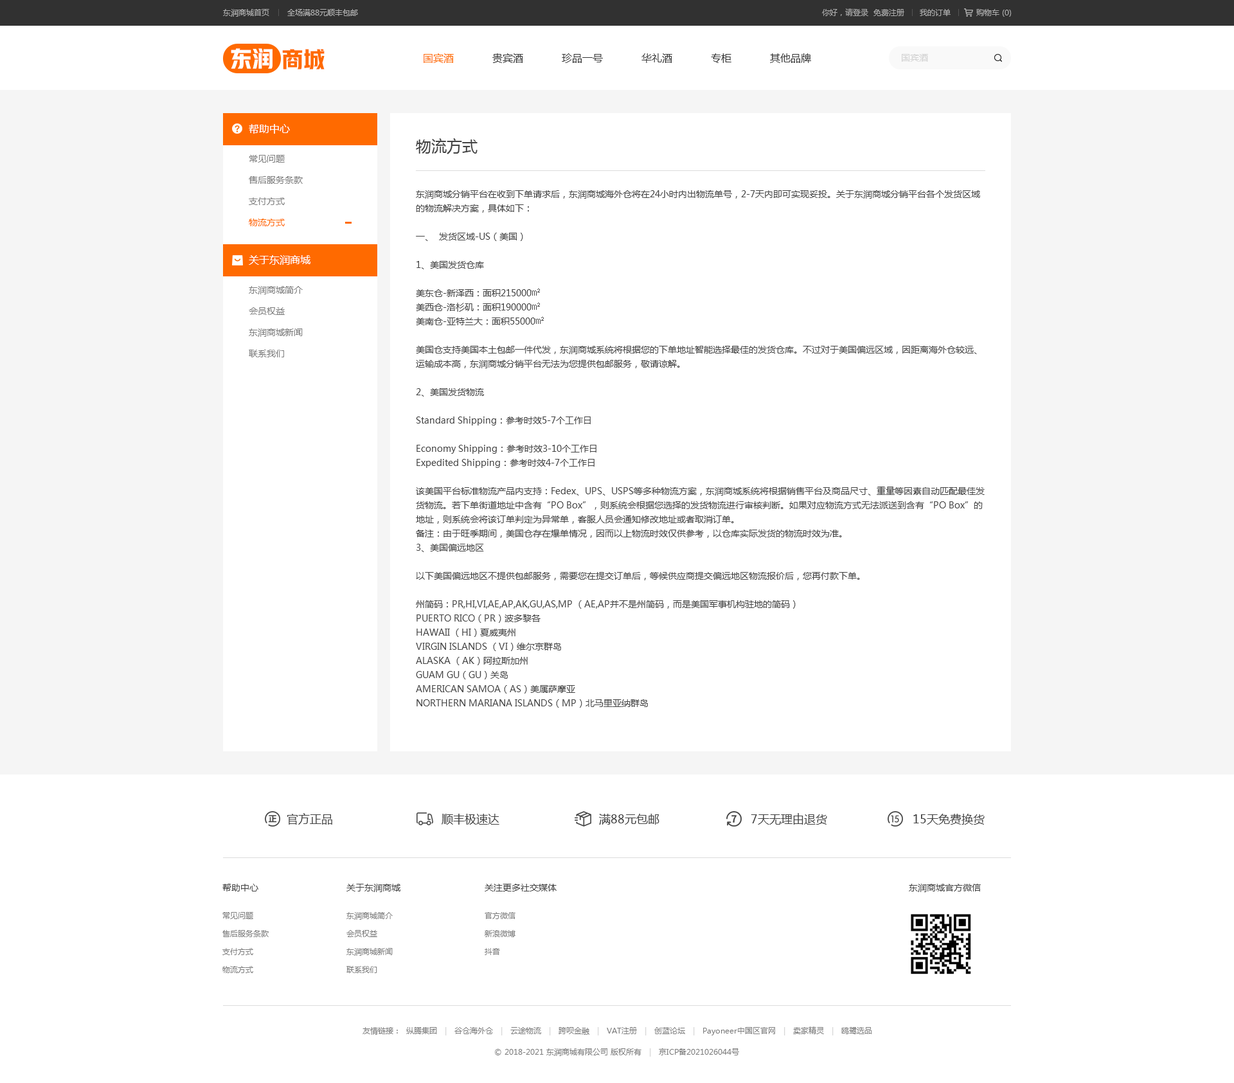
<style>
.page{position:relative;width:1234px;height:1083px;background:#ffffff}
.page>*{position:absolute;margin:0}
.t1{font:7.7px "MicrosoftYaHei";color:#b0b0b0}
.t2{font:7.7px "MicrosoftYaHei";color:#acacac}
.t3{font:21.9px "HYYakuHei-HEW";color:#ffffff}
.t4{font:21.9px "HYYakuHei-HEW";color:#ff6a00}
.t5{font:10.3px "MicrosoftYaHei";color:#333333}
.t6{font:10.3px "MicrosoftYaHei";color:#ff6a00}
.t7{font:9px "MicrosoftYaHei";color:#d2d2d2}
.t8{font:10.3px "MicrosoftYaHei";color:#ffffff}
.t9{font:15.4px "MicrosoftYaHei";color:#434343}
.t10{font:9px/21.2px "MicrosoftYaHei";color:#7d7d7d}
.t11{font:9px/21.2px "MicrosoftYaHei";color:#ff6a00}
.t12{font:9px/14.1px "MicrosoftYaHei";color:#434343}
.t13{font:9px/14.1px "SimSun";color:#434343}
.t14{font:11.6px "MicrosoftYaHei";color:#434343}
.t15{font:9px "MicrosoftYaHei";color:#434343}
.t16{font:7.7px/18px "MicrosoftYaHei";color:#7d7d7d}
.t17{font:7.7px "MicrosoftYaHei";color:#7d7d7d}
.t18{font:7.7px "MicrosoftYaHei";color:#d2d2d2}
</style>
<div class="page">
<p class="t1" style="left:223px;top:9px;width:135px;height:8px">东润商城首页       全场满88元顺丰包邮</p>
<p class="t2" style="left:822px;top:8px;width:190px;height:9px">你好，请登录  免费注册      我的订单          购物车 (0)</p>
<p class="t3" style="left:231px;top:48px;width:42px;height:21px">东润</p>
<p class="t4" style="left:282px;top:49px;width:43px;height:20px">商城</p>
<p class="t5" style="left:424px;top:53px;width:387px;height:10px"><span class="t6">国宾酒</span>            贵宾酒            珍品一号            华礼酒            专柜            其他品牌</p>
<p class="t7" style="left:902px;top:54px;width:26px;height:8px">国宾酒</p>
<p class="t8" style="left:249px;top:124px;width:41px;height:10px">帮助中心</p>
<p class="t9" style="left:416px;top:138px;width:62px;height:16px">物流方式</p>
<p class="t10" style="left:249px;top:155px;width:54px;height:71px">常见问题<br>售后服务条款<br>支付方式<br><span class="t11">物流方式</span></p>
<p class="t12" style="left:416px;top:190px;width:569px;height:518px">东润商城分销平台在收到下单请求后，东润商城海外仓将在24小时内出物流单号，2-7天内即可实现妥投。关于东润商城分销平台各个发货区域的物流解决方案，具体如下：<br> <br>一、  发货区域-US（美国）<br> <br>1、美国发货仓库<br> <br>美东仓-新泽西：面积215000<span class="t13">㎡</span><br>美西仓-洛杉矶：面积190000<span class="t13">㎡</span><br>美南仓-亚特兰大：面积55000<span class="t13">㎡</span><br> <br>美国仓支持美国本土包邮一件代发，东润商城系统将根据您的下单地址智能选择最佳的发货仓库。不过对于美国偏远区域，因距离海外仓较远、运输成本高，东润商城分销平台无法为您提供包邮服务，敬请谅解。<br> <br>2、美国发货物流<br> <br>Standard Shipping：参考时效5-7个工作日<br><br>Economy Shipping：参考时效3-10个工作日<br>Expedited Shipping：参考时效4-7个工作日<br> <br>该美国平台标准物流产品内支持：Fedex、UPS、USPS等多种物流方案，东润商城系统将根据销售平台及商品尺寸、重量等因素自动匹配最佳发货物流。若下单街道地址中含有“PO Box”，则系统会根据您选择的发货物流进行审核判断。如果对应物流方式无法派送到含有“PO Box”的地址，则系统会将该订单判定为异常单，客服人员会通知修改地址或者取消订单。<br>备注：由于旺季期间，美国仓存在爆单情况，因而以上物流时效仅供参考，以仓库实际发货的物流时效为准。<br>3、美国偏远地区<br> <br>以下美国偏远地区不提供包邮服务，需要您在提交订单后，等候供应商提交偏远地区物流报价后，您再付款下单。<br> <br>州简码：PR,HI,VI,AE,AP,AK,GU,AS,MP （AE,AP并不是州简码，而是美国军事机构驻地的简码）<br>PUERTO RICO（PR）波多黎各<br>HAWAII （HI）夏威夷州<br>VIRGIN ISLANDS （VI）维尔京群岛<br>ALASKA （AK）阿拉斯加州<br>GUAM GU（GU）关岛  <br>AMERICAN SAMOA（AS）美属萨摩亚<br>NORTHERN MARIANA ISLANDS（MP）北马里亚纳群岛<br> <br>二、发货区域-UK（英国）<br> <br>1、英国发货仓库<br> <br>英国伯明翰仓：面积100000<span class="t13">㎡</span><br>英国仓支持英国本土包邮一件代发，不过对于英国偏远区域，因距离海外仓较远、运输成本高，东润商城分销平台无法为您提供包邮服务，敬请谅解。<br> <br>2、英国发货物流<br> <br>Standard Shiping：参考时效3-5天<br> <br>该英国平台标准物流产品内支持：Yodel、Hermes、Royal Mail等多种物流方案，东润商城系统将根据销售平台及商品尺寸、重量等因素自动匹配最佳发货物流。<br> <br>3、英国偏远地区<br> <br>以下英国偏远地区不提供包邮服务，需要您在提交订单后，等候供应商提交偏远地区物流报价后，您再付款下单。<br>对于英国偏远地区，不同物流渠道定义有所不同，具体如下：<br> <br>Yodel偏远地区邮编：<br> <br>AB10-16, AB21-25，AB30-35, AB39, AB41-43, AB51-53，AB36-38, AB44-45, AB54-56；<br>BT1-9, BT10-44, BT45-49, BT51-58, BT60-61, BT62-67，BT68-82, BT92-94；<br>DD6-11；<br>EH35-40, EH42-46；<br>FK14, FK18-19，FK20，FK21；<br>HS1-9；<br>All IM；<br>IV1-3, IV4-11, IV12, IV13-28, IV30, IV31-32, IV36, IV40, IV41-49, IV51, IV52-54, IV55-56，IV63；<br>KA27-28；<br>KW1-13, KW14，KW15-17；<br>KY9-10, KY14-16；<br>PA20-33, PA34, PA35-38, PA41-48, PA49, PA60-61,PA62-72, PA73, PA74-75,PA76-78，PA80；<br>PH6-16,PH17-19,PH20-26,PH30-39, PH40-41，PH42-44，PH49, PH50；<br>PO30-41；<br>TD1-8, TD10-14；<br>TR21-25；<br>ZE1-3.<br> <br>A区为英国内陆地区，B区为偏远地区：ChannelIsland(GY1-9,GY10-99,JE1-9,JE10-99）不通邮；<br>BT1-9,BT10-99不通邮<br> <br>Hermes偏远地区邮编：<br>偏远地区包含：<br><br>Highlands&amp;Island\Channel Islands\Northern Ireland(BT)\BFPO\Isle of Man(IM)<br>以及邮编中含有以下前缀的区域：“GY”、“JE”、“ZE”、“BT”、“BF”、“IM”、“HS”、“KW”、“IV”、“AB36-38”、“AB54-56”、“FK17-21”、“PA20-80”、“PH15-50”、“KA27&amp;KA28”、“TR-25”。<br><br>三、发货区域-DE（德国）<br><br><br>1、德国发货仓库<br><br>德国迪岑巴赫仓：面积40000<span class="t13">㎡</span><br><br>德国仓支持德国本土包邮一件代发，东润商城系统将根据您的下单地址智能选择最佳的发货仓库。不过对于德国偏远区域，因距离海外仓较远、运输成本高，东润商城分销平台无法为您提供包邮服务，敬请谅解。<br><br><br><br>2、德国发货物流<br><br>Standard Shiping：参考时效1-3个工作日<br><br>德国平台标准物流产品内支持：DHL等物流方案，东润商城系统将根据销售平台及商品尺寸、重量等因素自动匹配最佳发货物流。<br><br><br>四、发货区域-FR（法国）<br><br><br>1、法国发货仓库<br><br>法国巴黎仓：面积33000<span class="t13">㎡</span><br><br>法国仓支持法国本土包邮一件代发，东润商城系统将根据您的下单地址智能选择最佳的发货仓库。不过对于法国偏远区域，因距离海外仓较远、运输成本高，东润商城分销平台无法为您提供包邮服务，敬请谅解。<br><br>2、法国发货物流<br><br>Standard Shipping：参考时效1-3个工作日<br><br>Standard International：参考时效1-7个工作日<br><br>Economy International：参考时效5-10个工作日<br><br>该法国平台标准物流产品内支持：GLS、LAPOSTE、FRC等多种物流方案，东润商城系统将根据销售平台及商品尺寸、重量等因素自动匹配最佳发货物流。<br><br>3、法国偏远地区<br><br>以下法国偏远地区不提供包邮服务，需要您在提交订单后，等待供应商提交偏远地区物流报价后，您再付款下单。<br><br>Corsica-柯西嘉<br>French Islands-法国岛屿<br>Mountainous areas-山区<br><br>五、发货区域-CZ (捷克）<br> <br>1、捷克发货仓库：捷克仓-布拉格：面积52000<span class="t13">㎡</span><br>捷克仓支持德国本土包邮一件代发，东润商城系统将根据您的下单地址智能选择最佳的发货仓库。不过对于德国偏远区域，因距离海外仓较远、运输成本高，东润商城分销平台无法为您提供包邮服务，敬请谅解。<br> <br>2、捷克发货物流：<br> Standard Shiping：参考时效1-3个工作日<br> Standard International: 参考时效3-5个工作日<br> <br> DHL-德国本地派送<br> DHL-国际派送<br> GLS-德国本地派送<br> GLS-欧洲国际包裹<br> *不接受PO.BOX地址<br><br><br>六、东润商城尾程物流方式查询网址<br>1、万能物流查询：https://www.17track.net/zh-cn<br>2、XPD: https://www.xdp.co.uk/express/ （需要输入查询跟踪单号和发货地址邮编）<br>3、Yodel: https://www.yodel.co.uk/<br>4、Royalmail: https://www3.royalmail.com/track-your-item#/<br>5、Fedex: https://www.fedex.com/en-us/home.html<br>6、DHL-德国包裹：https://www.dhl.de/en/privatkunden.html<br>7、GLS:https://www.dhl.de/en/privatkunden.html<br>8、USPS: https://www.usps.com/<br>9、UPS: https://www.ups.com/us/en/Home.page</p>
<p class="t8" style="left:249px;top:255px;width:61px;height:10px">关于东润商城</p>
<p class="t10" style="left:249px;top:286px;width:54px;height:71px">东润商城简介<br>会员权益<br>东润商城新闻<br>联系我们</p>
<p class="t14" style="left:287px;top:813px;width:45px;height:12px">官方正品</p>
<p class="t14" style="left:442px;top:814px;width:58px;height:11px">顺丰极速达</p>
<p class="t14" style="left:599px;top:814px;width:61px;height:11px">满88元包邮</p>
<p class="t14" style="left:751px;top:813px;width:76px;height:12px">7天无理由退货</p>
<p class="t14" style="left:914px;top:814px;width:71px;height:11px">15天免费换货</p>
<p class="t15" style="left:222px;top:884px;width:36px;height:8px">帮助中心</p>
<p class="t15" style="left:346px;top:884px;width:55px;height:8px">关于东润商城</p>
<p class="t15" style="left:485px;top:884px;width:72px;height:8px">关注更多社交媒体</p>
<p class="t15" style="left:909px;top:884px;width:72px;height:8px">东润商城官方微信</p>
<p class="t16" style="left:222px;top:912px;width:47px;height:61px">常见问题<br>售后服务条款<br>支付方式<br>物流方式</p>
<p class="t16" style="left:346px;top:912px;width:47px;height:61px">东润商城简介<br>会员权益<br>东润商城新闻<br>联系我们</p>
<p class="t16" style="left:485px;top:912px;width:31px;height:43px">官方微信<br>新浪微博<br>抖音</p>
<p class="t17" style="left:363px;top:1027px;width:509px;height:9px">友情链接：  纵腾集团   <span class="t18">|   </span>谷仓海外仓   <span class="t18">|   </span>云途物流   <span class="t18">|   </span>跨呗金融   <span class="t18">|   </span>VAT注册   <span class="t18">|   </span>创蓝论坛   <span class="t18">|   </span>Payoneer中国区官网   <span class="t18">|   </span>卖家精灵   <span class="t18">|   </span>鸥鹭选品</p>
<p class="t17" style="left:495px;top:1048px;width:244px;height:9px">© 2018-2021 东润商城有限公司 版权所有   <span class="t18">|   </span>京ICP备2021026044号</p>
</div>
